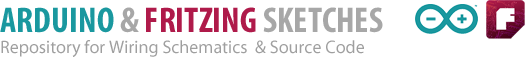
<style>
.page{position:relative;width:527px;height:74px;background:#ffffff}
.page>*{position:absolute;margin:0}
.t1{font:36px "MyriadPro-BoldCond";color:#af1a4a;text-transform:uppercase}
.t2{font:36px "MyriadPro-BoldCond";color:#1a989f;text-transform:uppercase}
.t3{font:36px "MyriadPro-BoldCond";color:#a7a7a7;text-transform:uppercase}
.t4{font:18px "MyriadPro-Regular";color:#9f9f9f}
</style>
<div class="page">
<p class="t1" style="left:0px;top:7px;width:383px;height:26px"><span class="t2">Arduino</span><span class="t3"> &amp; </span>Fritzing<span class="t3"> Sketches</span></p>
<p class="t4" style="left:1px;top:40px;width:363px;height:17px">Repository for Wiring Schematics  &amp; Source Code</p>
</div>
